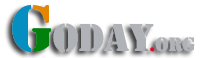
<style>
.page{position:relative;width:200px;height:58px;background:#ffffff}
.page>*{position:absolute;margin:0}
.t1{font:36px "StencilStd"}
.t2{font:60px "StencilStd"}
</style>
<div class="page">
<p class="t1" style="left:12px;top:5px;width:142px;height:47px"><span class="t2">G</span>oday</p>
</div>
